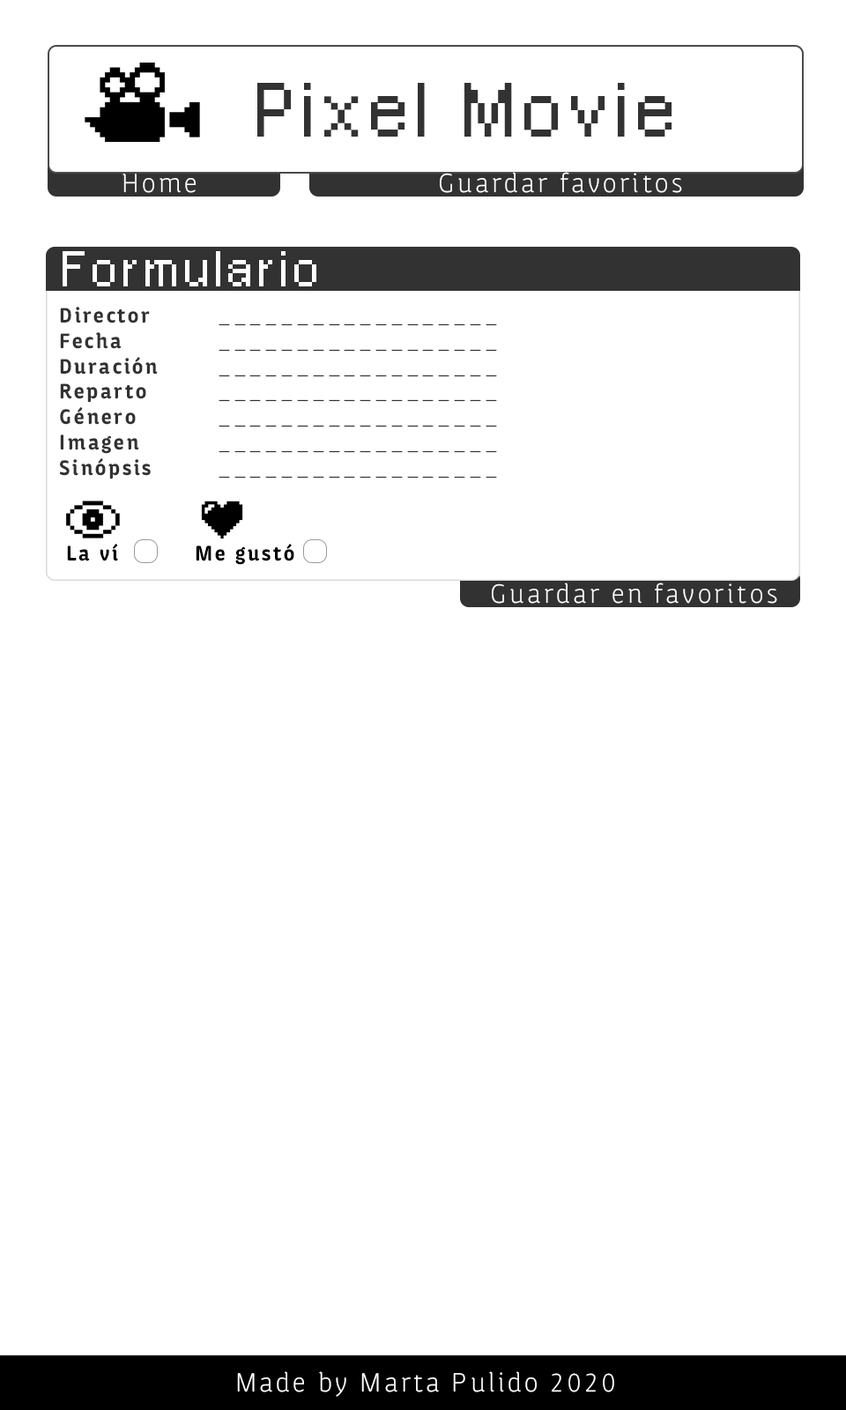
<style>
.page{position:relative;width:846px;height:1410px;background:#ffffff}
.page>*{position:absolute;margin:0}
.t1{font:53.7px "PixelArial11";letter-spacing:0.12em;color:#323232}
.t2{font:26.4px "Apparata-Light";letter-spacing:0.12em;color:#fefefe}
.t3{font:26.4px "Apparata-Light";letter-spacing:0.12em;color:#ffffff}
.t4{font:35.2px "PixelArial11";letter-spacing:0.12em;color:#ffffff}
.t5{font:21.1px "Apparata-Light";letter-spacing:0.12em;color:#323232}
.t6{font:21.1px "Apparata-Bold";letter-spacing:0.12em;color:#323232}
.t7{font:21.1px "Apparata-Bold";letter-spacing:0.12em;color:#000000}
</style>
<div class="page">
<p class="t1" style="left:257px;top:83px;width:415px;height:54px">Pixel Movie</p>
<p class="t2" style="left:122px;top:174px;width:74px;height:19px">Home</p>
<p class="t3" style="left:440px;top:172px;width:242px;height:21px">Guardar favoritos</p>
<p class="t4" style="left:63px;top:251px;width:253px;height:35px">Formulario</p>
<p class="t5" style="left:60px;top:307px;width:437px;height:172px"><span class="t6">Director </span>  __________________<br><span class="t6">Fecha</span>   __________________<br><span class="t6">Duración</span>  __________________<br><span class="t6">Reparto </span>  __________________<br><span class="t6">Género</span>   __________________<br><span class="t6">Imagen   </span>__________________<br><span class="t6">Sinópsis   </span>__________________</p>
<p class="t7" style="left:67px;top:544px;width:51px;height:17px">La ví</p>
<p class="t7" style="left:196px;top:544px;width:98px;height:21px">Me gustó</p>
<p class="t2" style="left:492px;top:582px;width:285px;height:22px">Guardar en favoritos</p>
<p class="t2" style="left:237px;top:1371px;width:377px;height:26px">Made by Marta Pulido 2020</p>
</div>
